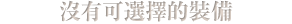
<style>
.page{position:relative;width:292px;height:24px;background:#ffffff}
.page>*{position:absolute;margin:0}
.t1{font:22px "RyuminPro-ExBold"}
</style>
<div class="page">
<p class="t1" style="left:60px;top:0px;width:173px;height:22px">沒有可選擇的裝備</p>
</div>
